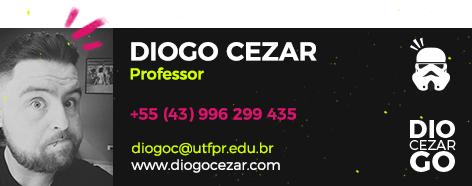
<style>
.page{position:relative;width:472px;height:186px;background:#151515}
.page>*{position:absolute;margin:0}
.t1{font:25.9px "Montserrat-SemiBold";color:#ffffff}
.t2{font:16px "Montserrat-Medium";color:#d1fe00}
.t3{font:16px "Montserrat-Medium";color:#dc136d}
.t4{font:14px "Montserrat-Light";color:#d1fe00}
.t5{font:14px "Montserrat-Light";color:#ffffff}
</style>
<div class="page">
<p class="t1" style="left:131px;top:42px;width:186px;height:19px">DIOGO CEZAR</p>
<p class="t2" style="left:130px;top:67px;width:74px;height:13px">Professor</p>
<p class="t3" style="left:130px;top:107px;width:166px;height:15px">+55 (43) 996 299 435</p>
<p class="t4" style="left:131px;top:142px;width:149px;height:31px">diogoc@utfpr.edu.br<br><span class="t5">www.diogocezar.com</span></p>
</div>
